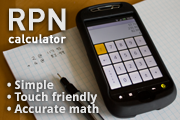
<style>
.page{position:relative;width:180px;height:120px}
.page>*{position:absolute;margin:0}
.t1{font:31.9px "DIN1451EF-MittelNeu";color:#e6e6e6;font-weight:bold}
.t2{font:13px "DIN1451EF-MittelNeu";color:#ffffff;font-weight:bold}
.t3{font:12px/12px "DroidSans-Bold";color:#e6e6e6}
</style>
<div class="page">
<p class="t1" style="left:9px;top:8px;width:57px;height:23px">RPN</p>
<p class="t2" style="left:8px;top:34px;width:58px;height:10px">calculator</p>
<p class="t3" style="left:7px;top:80px;width:92px;height:33px">• Simple<br>• Touch friendly<br>• Accurate math</p>
<p class="t3" style="left:7px;top:80px;width:92px;height:33px">• Simple<br>• Touch friendly<br>• Accurate math</p>
</div>
